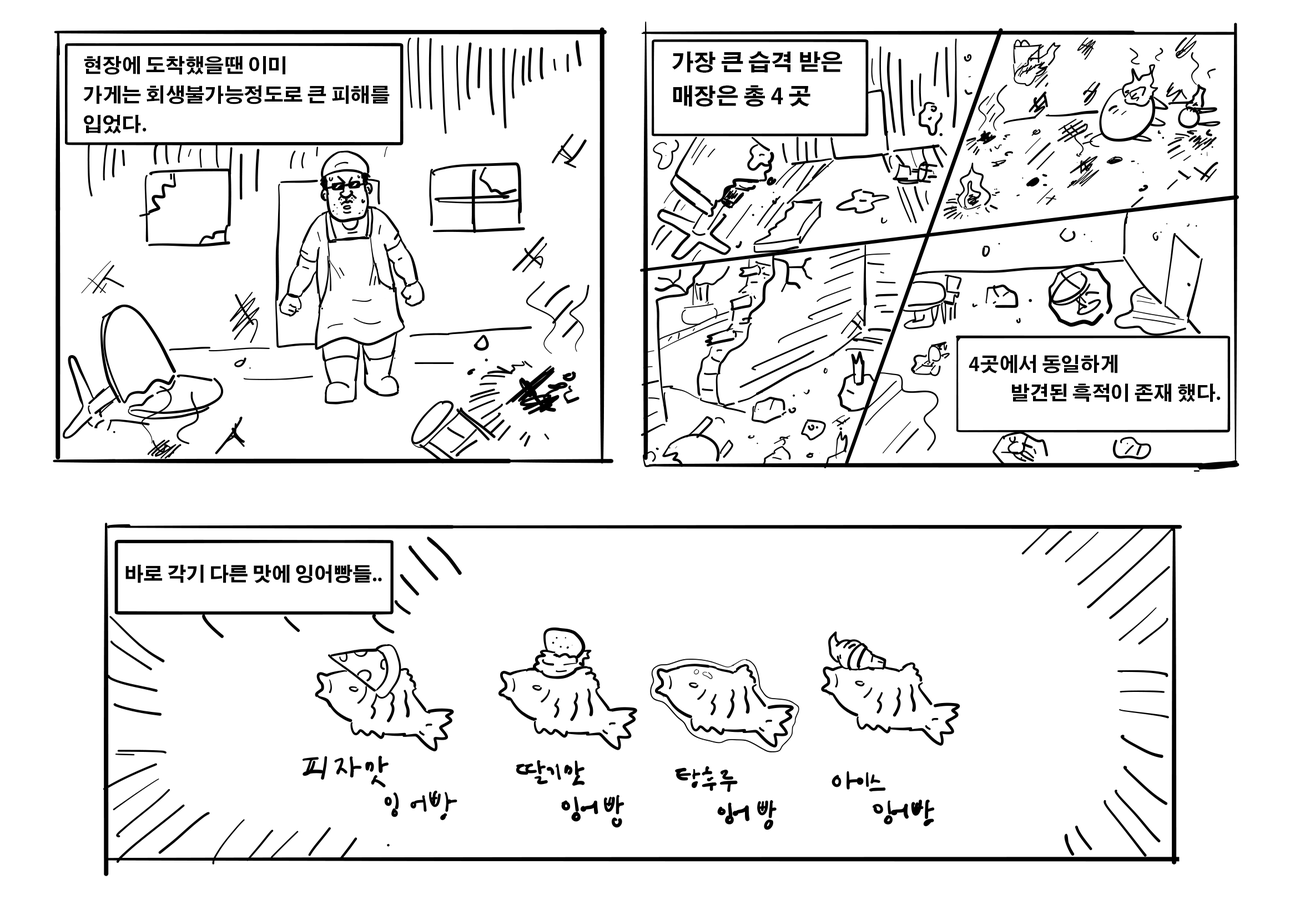
<style>
.page{position:relative;width:1310px;height:910px;background:#ffffff}
.page>*{position:absolute;margin:0}
.t1{font:22.5px "AdobeGothicStd-Bold";color:#000000}
.t2{font:19.6px "AdobeGothicStd-Bold";color:#000000}
.t3{font:19.3px "AdobeGothicStd-Bold";color:#000000}
</style>
<div class="page">
<p class="t1" style="left:672px;top:51px;width:170px;height:56px">가장 큰 습격 받은 <br>매장은 총 4 곳</p>
<p class="t2" style="left:83px;top:56px;width:307px;height:78px">현장에 도착했을땐 이미<br>가게는 회생불가능정도로 큰 피해를 <br>입었다.</p>
<p class="t3" style="left:969px;top:355px;width:252px;height:47px">4곳에서 동일하게 <br>          발견된 흑적이 존재 했다.</p>
</div>
